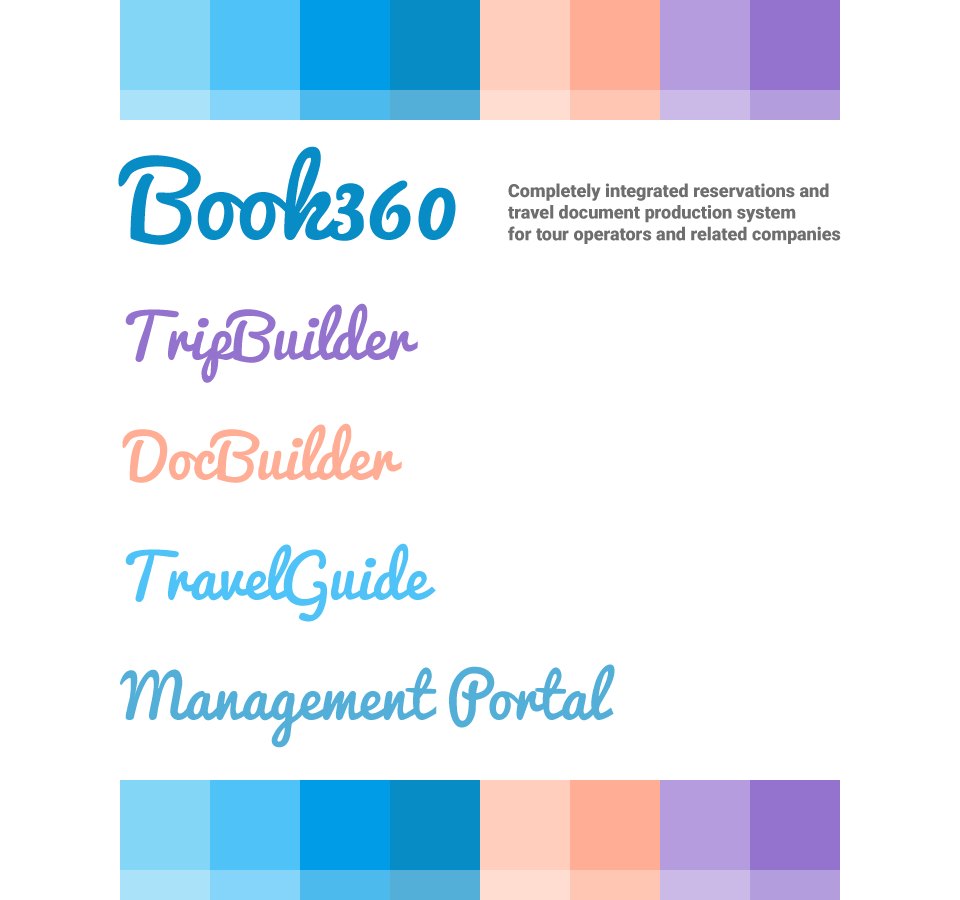
<style>
.page{position:relative;width:960px;height:900px;background:#ffffff}
.page>*{position:absolute;margin:0}
.t1{font:100px "Pacifico";color:#088cc6}
.t2{font:18px "Roboto-Regular";color:#6e6e6e}
.t3{font:60px "Pacifico";color:#9473ce}
.t4{font:60px "Pacifico";color:#ffad94}
.t5{font:60px "Pacifico";color:#4fc3f7}
.t6{font:60px "Pacifico";color:#53afd7}
</style>
<div class="page">
<p class="t1" style="left:118px;top:146px;width:338px;height:99px">Book360</p>
<p class="t2" style="left:508px;top:183px;width:333px;height:61px">Completely integrated reservations and <br>travel document production system<br>for tour operators and related companies</p>
<p class="t3" style="left:125px;top:303px;width:293px;height:80px">TripBuilder</p>
<p class="t4" style="left:122px;top:423px;width:280px;height:60px">DocBuilder</p>
<p class="t5" style="left:125px;top:543px;width:311px;height:79px">TravelGuide</p>
<p class="t6" style="left:120px;top:664px;width:495px;height:84px">Management Portal</p>
</div>
